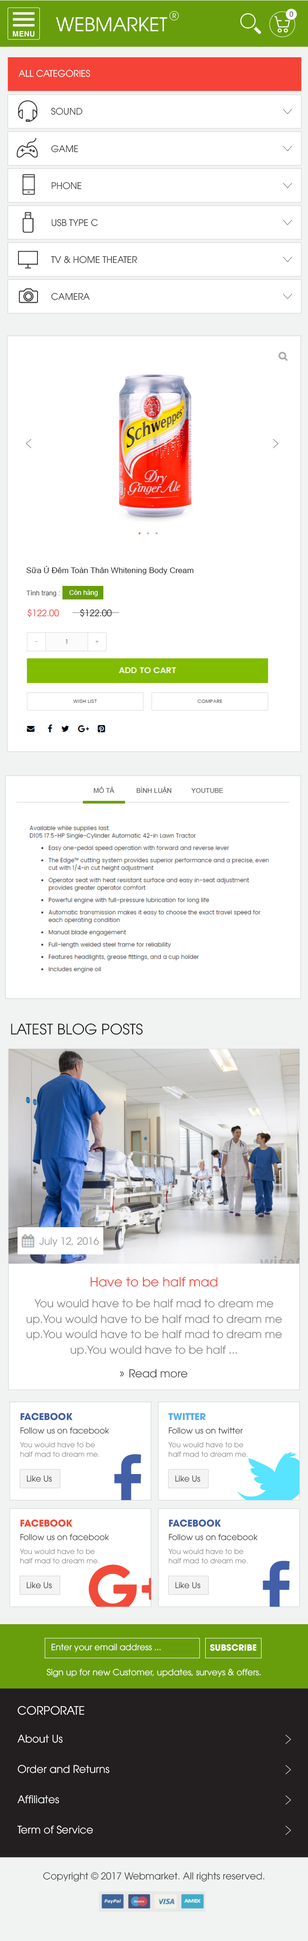
<style>
.page{position:relative;width:308px;height:1941px;background:#ffffff}
.page>*{position:absolute;margin:0}
.t1{font:18.9px "UTM-Avo";color:#ffffff}
.t2{font:6.2px "UTM-Avo";color:#ffffff}
.t3{font:6.6px "UTM-Avo"}
.t4{font:7.4px "UTMHelveBold";color:#ffffff}
.t5{font:9px "UTM-Avo";color:#ffffff}
.t6{font:9px "UTM-Avo";color:#414042}
.t7{font:8.1px "ArialMT";color:#282828}
.t8{font:6.6px "ArialMT";color:#58595b}
.t9{font:6.6px "ArialMT";color:#ffffff}
.t10{font:8.9px "UTM-Avo";color:#f54337}
.t11{font:8.9px "UTM-Avo";color:#231f20}
.t12{font:14.5px "UTM-Avo";color:#231f20}
.t13{font:10px "UTM-Avo";color:#939598}
.t14{font:12.7px "UTM-Avo";color:#f54337}
.t15{font:10.9px/15.4px "UTM-Avo";color:#808285}
.t16{font:10.9px "UTM-Avo";color:#414042}
.t17{font:8.5px "UTM-Avo";color:#ffffff}
.t18{font:8.5px "UTMAvoBold";color:#ffffff}
.t19{font:11.4px "UTM-Avo";color:#ffffff}
.t20{font:10.4px "UTM-Avo";color:#ffffff}
.t21{font:9.5px "UTM-Avo";color:#414042}
</style>
<div class="page">
<p class="t1" style="left:56px;top:17px;width:111px;height:14px">WEBMARKET</p>
<p class="t2" style="left:172px;top:13px;width:4px;height:5px">R</p>
<p class="t3" style="left:289px;top:11px;width:4px;height:6px">0</p>
<p class="t4" style="left:13px;top:31px;width:22px;height:6px">MENU</p>
<p class="t5" style="left:18px;top:70px;width:72px;height:7px">ALL CATEGORIES</p>
<p class="t6" style="left:51px;top:108px;width:31px;height:7px">SOUND</p>
<p class="t6" style="left:51px;top:145px;width:27px;height:8px">GAME</p>
<p class="t6" style="left:52px;top:182px;width:29px;height:7px">PHONE</p>
<p class="t6" style="left:52px;top:219px;width:46px;height:7px">USB TYPE C</p>
<p class="t6" style="left:51px;top:256px;width:86px;height:7px">TV &amp; HOME THEATER</p>
<p class="t6" style="left:51px;top:293px;width:39px;height:7px">CAMERA</p>
<p class="t7" style="left:27px;top:566px;width:166px;height:9px">Sữa Ủ Đêm Toàn Thân Whitening Body Cream</p>
<p class="t8" style="left:26px;top:590px;width:34px;height:7px">Tình trạng :</p>
<p class="t9" style="left:69px;top:590px;width:29px;height:6px">Còn hàng</p>
<p class="t10" style="left:27px;top:609px;width:32px;height:8px">$122.00</p>
<p class="t11" style="left:80px;top:609px;width:32px;height:8px">$122.00</p>
<p class="t8" style="left:94px;top:787px;width:21px;height:6px">MÔ TẢ</p>
<p class="t8" style="left:136px;top:787px;width:35px;height:7px">BÌNH LUẬN</p>
<p class="t8" style="left:191px;top:788px;width:32px;height:5px">YOUTUBE</p>
<p class="t12" style="left:11px;top:1024px;width:132px;height:11px">LATEST BLOG POSTS</p>
<p class="t13" style="left:39px;top:1237px;width:60px;height:10px">July 12, 2016</p>
<p class="t14" style="left:90px;top:1277px;width:127px;height:10px">Have to be half mad</p>
<p class="t15" style="left:27px;top:1299px;width:255px;height:57px;text-align:center">You would have to be half mad to dream me up.You would have to be half mad to dream me up.You would have to be half mad to dream me up.You would have to be half ...</p>
<p class="t16" style="left:129px;top:1369px;width:59px;height:9px">Read more</p>
<p class="t17" style="left:51px;top:1644px;width:110px;height:8px">Enter your email address ...</p>
<p class="t18" style="left:210px;top:1644px;width:46px;height:7px">SUBSCRIBE</p>
<p class="t17" style="left:46px;top:1669px;width:215px;height:8px">Sign up for new Customer, updates, surveys &amp; offers.</p>
<p class="t19" style="left:18px;top:1706px;width:66px;height:9px">CORPORATE</p>
<p class="t20" style="left:18px;top:1735px;width:45px;height:8px">About Us</p>
<p class="t20" style="left:18px;top:1765px;width:91px;height:8px">Order and Returns</p>
<p class="t20" style="left:18px;top:1795px;width:41px;height:9px">Affiliates</p>
<p class="t20" style="left:17px;top:1826px;width:76px;height:8px">Term of Service</p>
<p class="t21" style="left:43px;top:1872px;width:221px;height:10px">Copyright © 2017 Webmarket. All rights reserved.</p>
</div>
